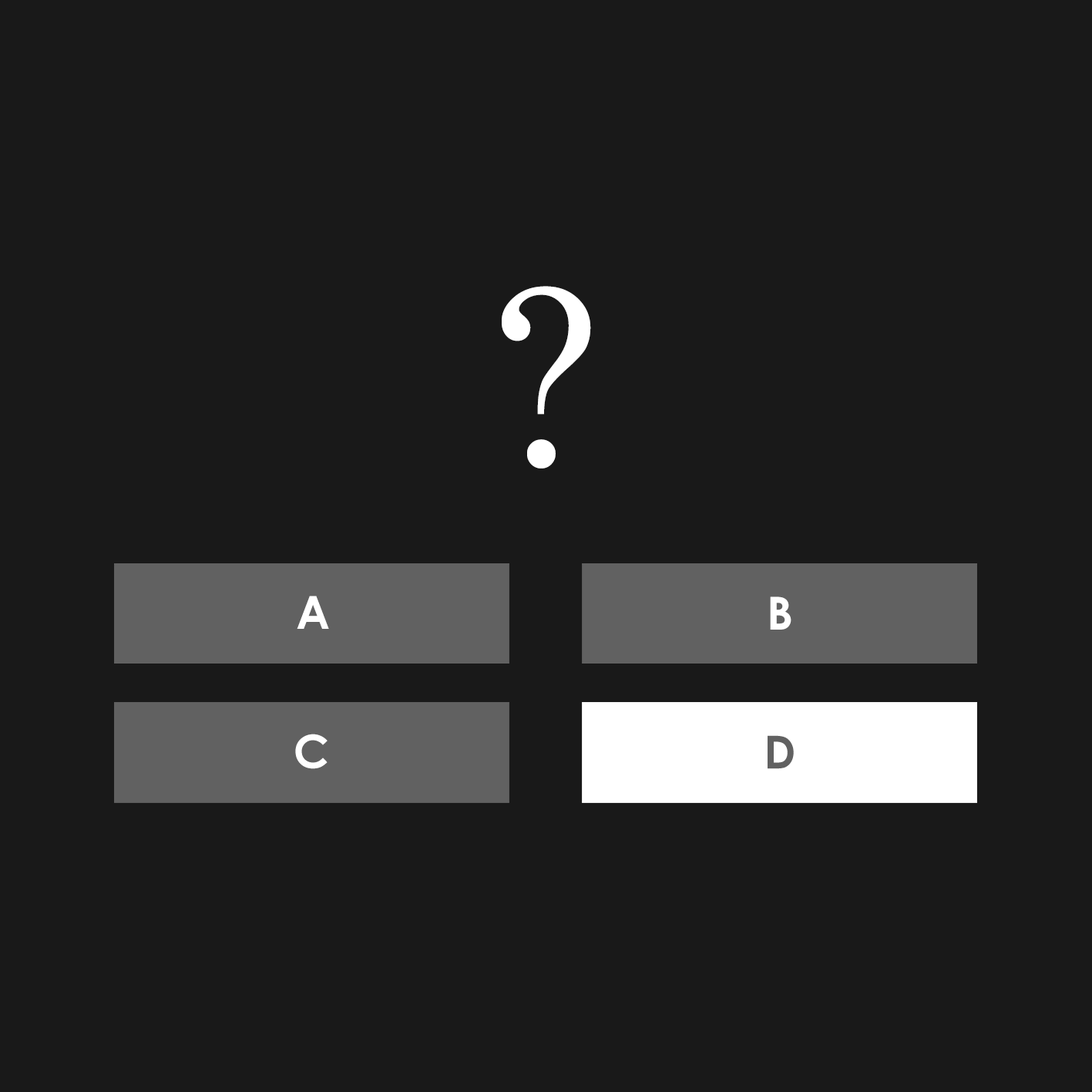
<style>
.page{position:relative;width:1092px;height:1092px;background:#191919}
.page>*{position:absolute;margin:0}
.t1{font:241.2px "Century";color:#ffffff}
.t2{font:45.7px "CenturyGothic-Bold";color:#ffffff}
.t3{font:45.7px "CenturyGothic-Bold";color:#616161}
</style>
<div class="page">
<p class="t1" style="left:502px;top:286px;width:89px;height:183px">?</p>
<p class="t2" style="left:297px;top:596px;width:32px;height:33px">A</p>
<p class="t2" style="left:770px;top:596px;width:21px;height:34px">B</p>
<p class="t2" style="left:295px;top:734px;width:33px;height:35px">C</p>
<p class="t3" style="left:768px;top:735px;width:26px;height:34px">D</p>
</div>
